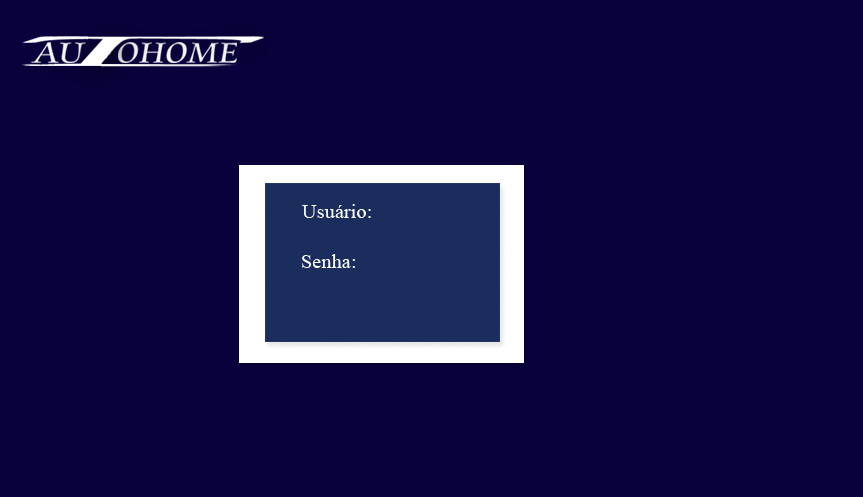
<style>
.page{position:relative;width:863px;height:497px;background:#08013b}
.page>*{position:absolute;margin:0}
.t1{font:31px "CataneoBT-Regular";color:#ffffff;scale:1.13 1}
.t2{font:20.4px "TimesNewRomanPSMT";color:#ffffff}
</style>
<div class="page">
<p class="t1" style="left:118px;top:42px;width:119px;height:21px">OHOME</p>
<p class="t2" style="left:302px;top:204px;width:69px;height:14px">Usuário:</p>
<p class="t2" style="left:302px;top:254px;width:53px;height:14px">Senha:</p>
</div>
